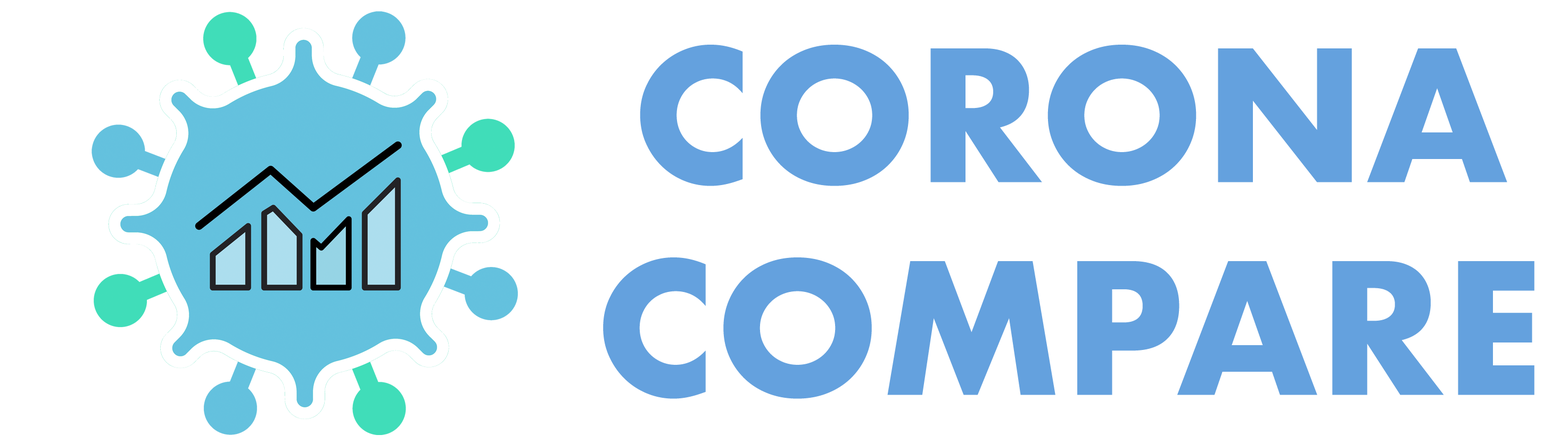
<style>
.page{position:relative;width:1568px;height:443px;background:#ffffff}
.page>*{position:absolute;margin:0}
.t1{font:177.4px "Futura-Bold";color:#64a1de}
</style>
<div class="page">
<p class="t1" style="left:603px;top:45px;width:931px;height:354px;text-align:center">CORONA<br>COMPARE</p>
</div>
